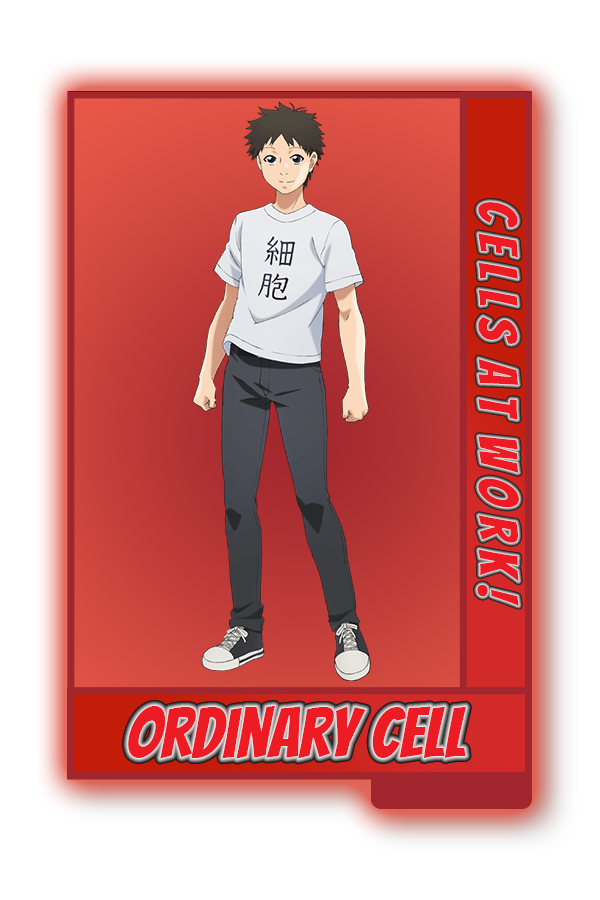
<style>
.page{position:relative;width:600px;height:900px;background:#ffffff}
.page>*{position:absolute;margin:0}
.t1{font:54px "Bangers-Regular";color:#ed1c24}
.t2{font:70px "Bangers-Regular";color:#ed1c24}
</style>
<div class="page">
<p class="t1" style="left:477px;top:202px;width:42px;height:404px;rotate:90deg">C e l l S  A t  W o r k !</p>
<p class="t2" style="left:128px;top:706px;width:338px;height:53px">Ordinary cell</p>
</div>
